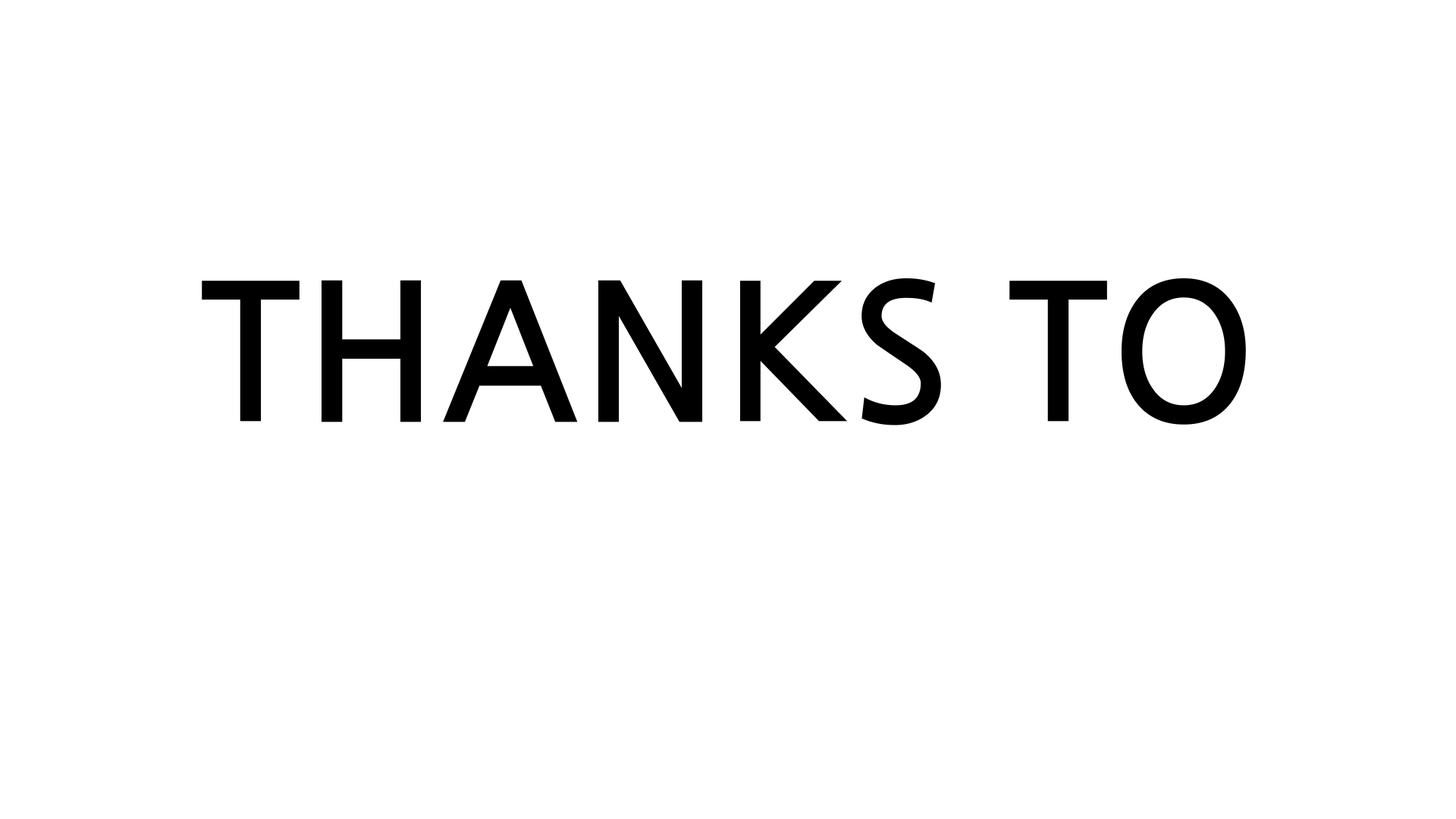
<style>
.page{position:relative;width:1456px;height:819px;background:#ffffff}
.page>*{position:absolute;margin:0}
.t1{font:189.6px "JejuGothic";color:#000000}
.t2{font:75.8px "JejuGothic";color:#000000}
</style>
<div class="page">
<p class="t1" style="left:202px;top:278px;width:1044px;height:147px"><span class="t2"><br><br></span>THANKS TO</p>
</div>
